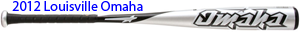
<style>
.page{position:relative;width:300px;height:32px;background:#ffffff}
.page>*{position:absolute;margin:0}
.t1{font:14px "MyriadPro-Regular";color:#0000ff}
</style>
<div class="page">
<p class="t1" style="left:12px;top:1px;width:131px;height:10px">2012 Louisville Omaha</p>
</div>
